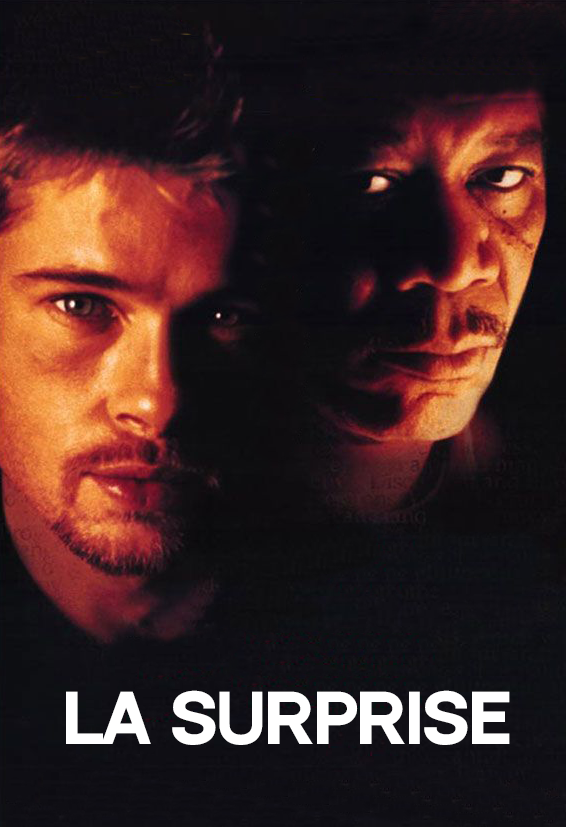
<style>
.page{position:relative;width:566px;height:827px}
.page>*{position:absolute;margin:0}
.t1{font:64.5px "NeutralFaceBold";letter-spacing:0.005em;color:#ffffff}
</style>
<div class="page">
<p class="t1" style="left:66px;top:690px;width:444px;height:55px">la surprise</p>
</div>
